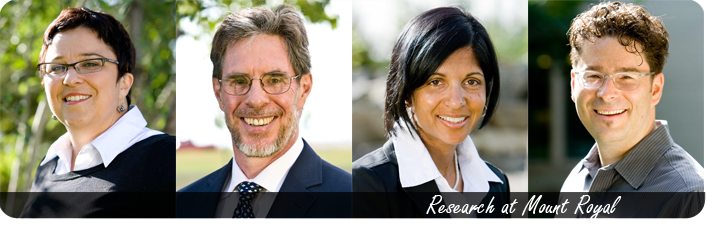
<style>
.page{position:relative;width:712px;height:226px}
.page>*{position:absolute;margin:0}
.t1{font:28.5px "FreestyleScript-Regular";color:#ffffff}
</style>
<div class="page">
<p class="t1" style="left:426px;top:195px;width:196px;height:26px">Research at Mount Royal</p>
</div>
